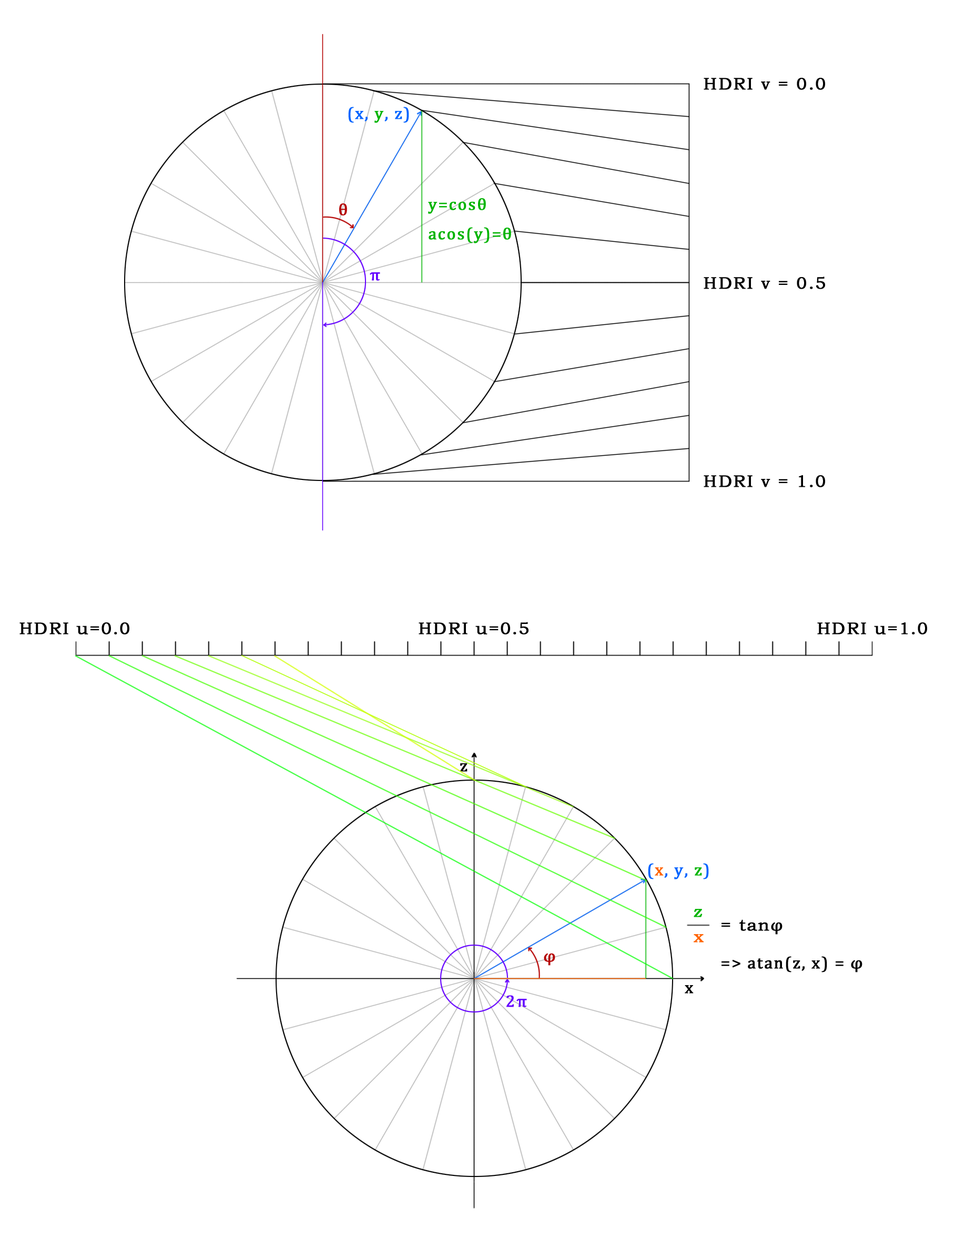
<style>
.page{position:relative;width:955px;height:1249px;background:#ffffff}
.page>*{position:absolute;margin:0}
.t1{font:16.8px "BookmanOldStyle";letter-spacing:0.06em;color:#000000;font-weight:bold}
.t2{font:16.8px "Cambria";letter-spacing:0.06em;color:#0064ff;font-weight:bold}
.t3{font:16.8px "Cambria";letter-spacing:0.06em;color:#00b400;font-weight:bold}
.t4{font:16.8px "Cambria";letter-spacing:0.06em;color:#b40000;font-weight:bold}
.t5{font:16.8px "Cambria";letter-spacing:0.06em;color:#6400ff;font-weight:bold}
.t6{font:16.8px "Cambria";letter-spacing:0.06em;color:#000000;font-weight:bold}
.t7{font:16.8px "Cambria";letter-spacing:0.06em;color:#ff6400;font-weight:bold}
.t8{font:16.8px/25.2px "BookmanOldStyle";letter-spacing:0.06em;color:#00b400;font-weight:bold}
.t9{font:16.8px/25.2px "BookmanOldStyle";letter-spacing:0.06em;color:#ff6400;font-weight:bold}
.t10{font:16.8px/37.9px "Cambria";letter-spacing:0.06em;color:#000000;font-weight:bold}
.t11{font:16.8px/37.9px "BookmanOldStyle";letter-spacing:0.06em;color:#000000;font-weight:bold}
</style>
<div class="page">
<p class="t1" style="left:703px;top:78px;width:122px;height:12px">HDRI v = 0.0</p>
<p class="t2" style="left:348px;top:107px;width:61px;height:16px">(x, <span class="t3">y</span>, z)</p>
<p class="t4" style="left:339px;top:203px;width:8px;height:13px">θ</p>
<p class="t3" style="left:428px;top:198px;width:83px;height:45px">y=cosθ<br>acos(y)=θ</p>
<p class="t5" style="left:370px;top:272px;width:10px;height:9px">π</p>
<p class="t1" style="left:703px;top:277px;width:122px;height:12px">HDRI v = 0.5</p>
<p class="t1" style="left:703px;top:475px;width:122px;height:12px">HDRI v = 1.0</p>
<p class="t1" style="left:19px;top:622px;width:110px;height:13px">HDRI u=0.0</p>
<p class="t1" style="left:418px;top:622px;width:110px;height:13px">HDRI u=0.5</p>
<p class="t1" style="left:817px;top:622px;width:110px;height:13px">HDRI u=1.0</p>
<p class="t6" style="left:460px;top:763px;width:7px;height:9px">z</p>
<p class="t2" style="left:648px;top:863px;width:61px;height:16px">(<span class="t7">x</span>, y, <span class="t3">z</span>)</p>
<p class="t8" style="left:693px;top:909px;width:10px;height:34px">z<br><span class="t9">x</span></p>
<p class="t10" style="left:721px;top:919px;width:141px;height:54px"><span class="t11">= tan</span>φ<br>=&gt; atan(z, x) = φ</p>
<p class="t4" style="left:544px;top:953px;width:11px;height:13px">φ</p>
<p class="t6" style="left:684px;top:985px;width:9px;height:9px">x</p>
<p class="t5" style="left:506px;top:995px;width:21px;height:12px">2π</p>
</div>
